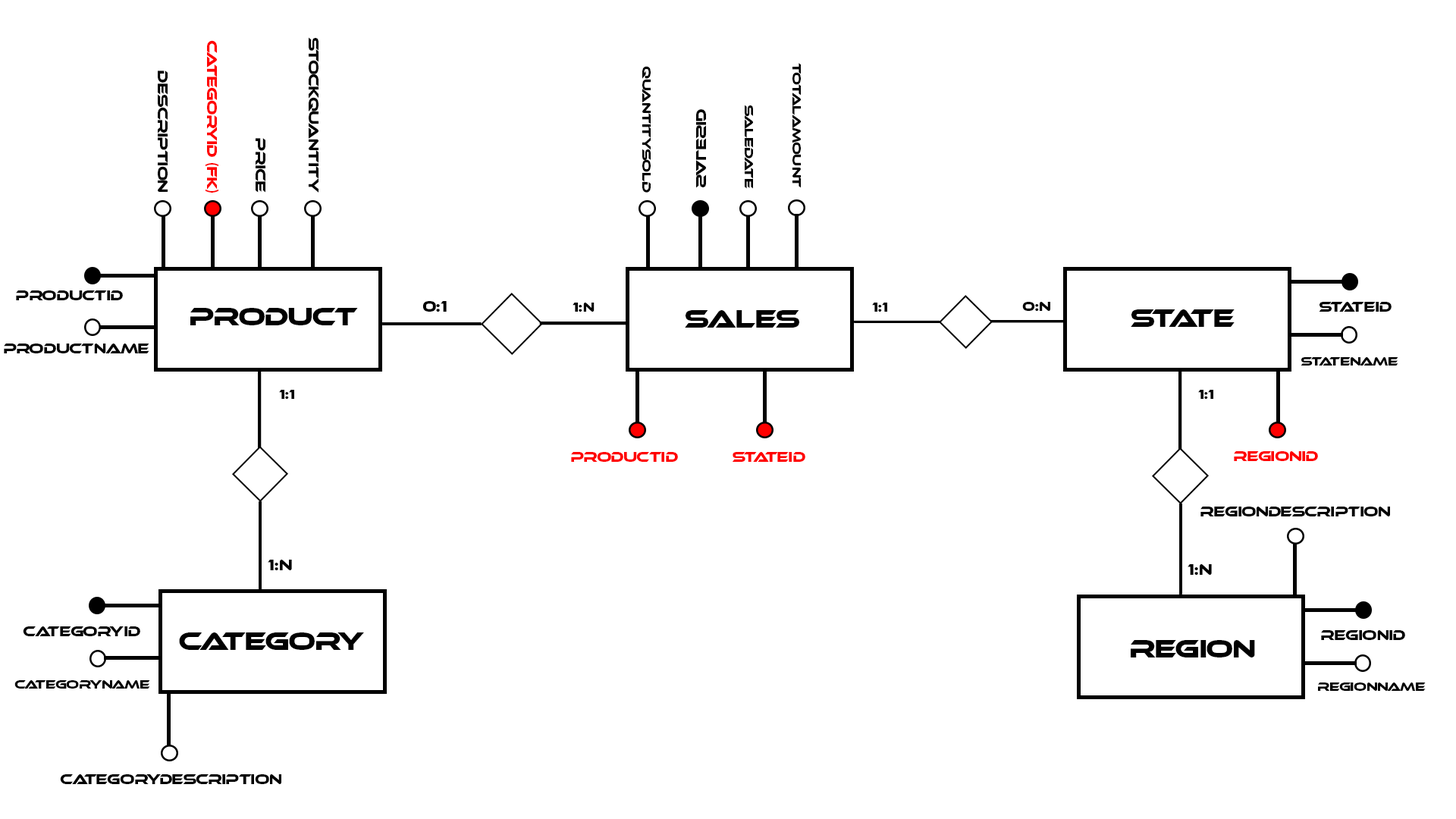
<style>
.page{position:relative;width:1456px;height:819px;background:#ffffff}
.page>*{position:absolute;margin:0}
.t1{font:14px "EthnocentricRg-Regular";letter-spacing:-0.05em;color:#ff0000}
.t2{font:14px "EthnocentricRg-Regular";letter-spacing:-0.05em;color:#010101}
.t3{font:12.2px "EthnocentricRg-Regular";letter-spacing:-0.05em;color:#010101}
.t4{font:15.2px "EthnocentricRg-Regular";letter-spacing:-0.05em;color:#000000}
.t5{font:13.6px "EthnocentricRg-Regular";letter-spacing:-0.05em;color:#000000}
.t6{font:26px "EthnocentricRg-Regular";letter-spacing:-0.05em;color:#010101}
.t7{font:14px "EthnocentricRg-Regular";letter-spacing:-0.05em;color:#000000}
</style>
<div class="page">
<p class="t1" style="left:206px;top:40px;width:12px;height:153px;rotate:90deg">CategoryID (FK)</p>
<p class="t2" style="left:309px;top:37px;width:9px;height:156px;rotate:90deg">StockQuantity</p>
<p class="t3" style="left:642px;top:66px;width:9px;height:127px;rotate:90deg">QuantitySold</p>
<p class="t3" style="left:792px;top:63px;width:9px;height:125px;rotate:90deg">TotalAmount</p>
<p class="t2" style="left:158px;top:71px;width:10px;height:121px;rotate:90deg">Description</p>
<p class="t2" style="left:696px;top:109px;width:10px;height:79px;rotate:-90deg">SalesID</p>
<p class="t3" style="left:745px;top:105px;width:8px;height:84px;rotate:90deg">SaleDate</p>
<p class="t2" style="left:256px;top:138px;width:9px;height:55px;rotate:90deg">Price</p>
<p class="t2" style="left:16px;top:290px;width:107px;height:10px">ProductID</p>
<p class="t4" style="left:422px;top:301px;width:25px;height:11px">0:1</p>
<p class="t5" style="left:573px;top:303px;width:22px;height:9px">1:n</p>
<p class="t5" style="left:872px;top:303px;width:15px;height:9px">1:1</p>
<p class="t5" style="left:1022px;top:302px;width:28px;height:9px">0:N</p>
<p class="t2" style="left:1319px;top:302px;width:73px;height:10px">StateID</p>
<p class="t6" style="left:190px;top:308px;width:168px;height:17px">product</p>
<p class="t6" style="left:685px;top:310px;width:114px;height:18px">sales</p>
<p class="t6" style="left:1131px;top:309px;width:104px;height:18px">state</p>
<p class="t2" style="left:4px;top:344px;width:145px;height:9px">ProductName</p>
<p class="t3" style="left:1301px;top:357px;width:97px;height:9px">StateName</p>
<p class="t5" style="left:279px;top:390px;width:15px;height:9px">1:1</p>
<p class="t5" style="left:1198px;top:390px;width:15px;height:9px">1:1</p>
<p class="t1" style="left:571px;top:452px;width:107px;height:10px">ProductID</p>
<p class="t1" style="left:732px;top:452px;width:73px;height:10px">StateID</p>
<p class="t1" style="left:1234px;top:451px;width:84px;height:10px">RegionID</p>
<p class="t7" style="left:1200px;top:507px;width:190px;height:9px">RegionDescription</p>
<p class="t4" style="left:268px;top:560px;width:24px;height:10px">1:N</p>
<p class="t4" style="left:1188px;top:564px;width:24px;height:11px">1:N</p>
<p class="t2" style="left:23px;top:626px;width:117px;height:10px">CategoryID</p>
<p class="t6" style="left:179px;top:632px;width:185px;height:18px">CATEGORY</p>
<p class="t6" style="left:1131px;top:640px;width:124px;height:17px">region</p>
<p class="t2" style="left:1321px;top:630px;width:84px;height:10px">RegionID</p>
<p class="t3" style="left:14px;top:680px;width:136px;height:9px">CategoryName</p>
<p class="t3" style="left:1318px;top:682px;width:108px;height:9px">RegionName</p>
<p class="t2" style="left:60px;top:774px;width:221px;height:10px">CategoryDescription</p>
</div>
